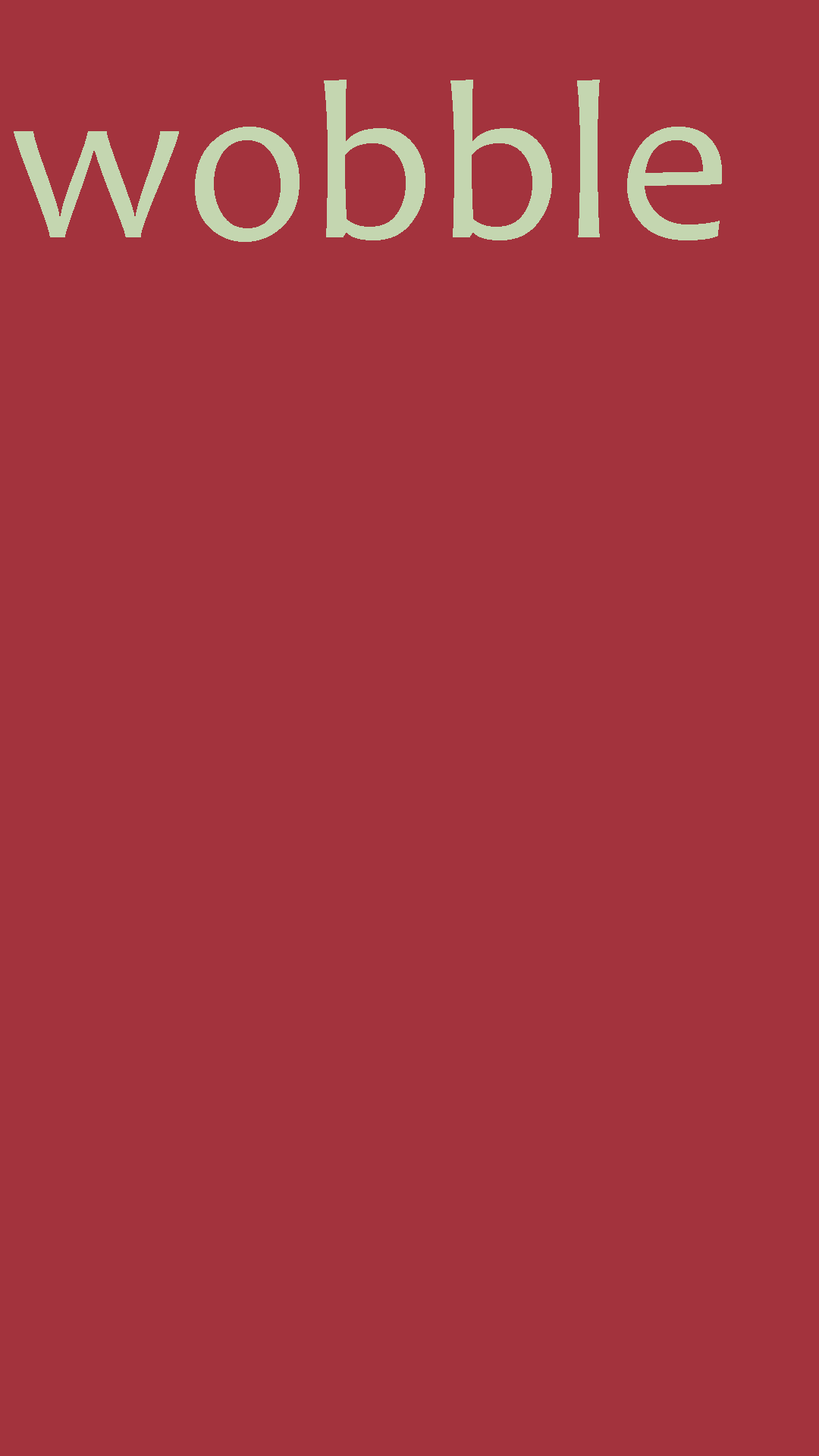
<style>
.page{position:relative;width:819px;height:1456px;background:#a3333d}
.page>*{position:absolute;margin:0}
.t1{font:227.5px "Candara";color:#c4d6b0}
</style>
<div class="page">
<p class="t1" style="left:14px;top:80px;width:708px;height:162px">wobble</p>
</div>
